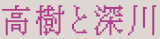
<style>
.page{position:relative;width:160px;height:39px;background:#ded6d2}
.page>*{position:absolute;margin:0}
.t1{font:30px "KH-Dot-kagurazaka-16";letter-spacing:0.14em;color:#c02f7a}
</style>
<div class="page">
<p class="t1" style="left:1px;top:5px;width:156px;height:31px">高樹と深川</p>
</div>
